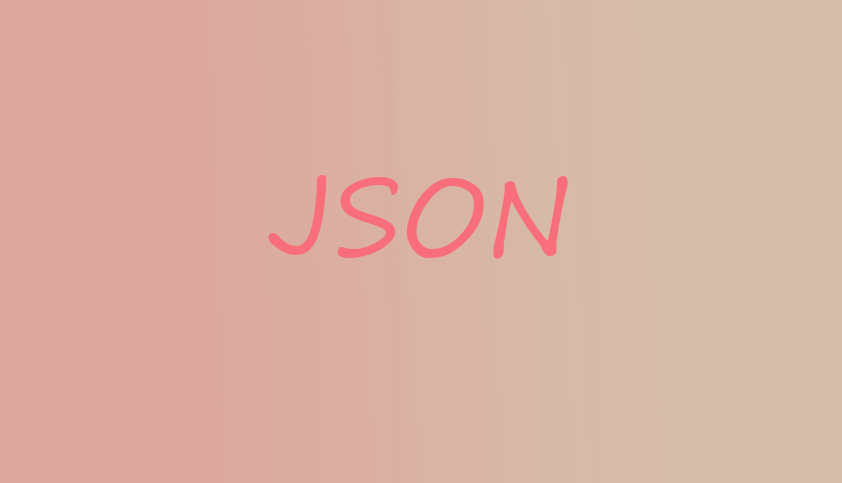
<style>
.page{position:relative;width:842px;height:483px}
.page>*{position:absolute;margin:0}
.t1{font:106.7px "SegoePrint";color:#f86e7b}
</style>
<div class="page">
<p class="t1" style="left:268px;top:175px;width:300px;height:84px">JSON</p>
</div>
